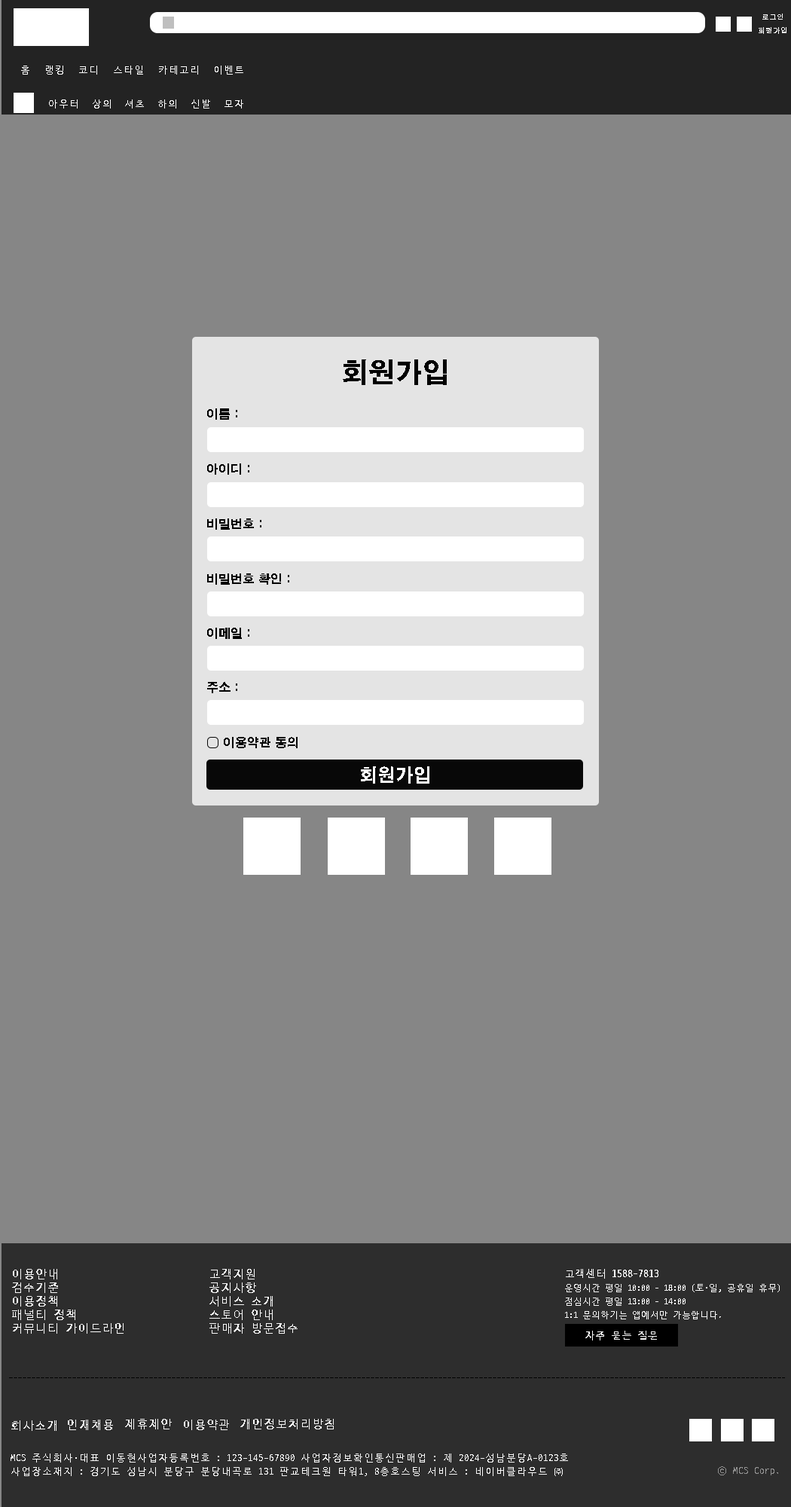
<style>
.page{position:relative;width:791px;height:1507px;background:#868686}
.page>*{position:absolute;margin:0}
.t1{font:7.5px "Gulim";color:#ffffff}
.t2{font:9.8px "D2Coding";color:#ffffff}
.t3{font:27.1px "H2gtrE";color:#010101}
.t4{font:12.1px "H2gtrE";color:#010101}
.t5{font:12.1px "H2gtrE";color:#080808}
.t6{font:18.1px "H2gtrE";color:#ffffff}
.t7{font:12.1px/13.6px "D2CodingBold";color:#fafafa}
.t8{font:9px/13.6px "D2Coding";color:#fafafa}
.t9{font:10.5px/13.6px "D2CodingBold";color:#fafafa}
.t10{font:10.5px "D2CodingBold";color:#fafafa}
.t11{font:12.1px "D2CodingBold";color:#fafafa}
.t12{font:9.8px/13.6px "D2Coding";color:#fafafa}
.t13{font:9.8px "D2Coding";color:#919191}
</style>
<div class="page">
<p class="t1" style="left:763px;top:14px;width:20px;height:6px">로그인</p>
<p class="t1" style="left:759px;top:27px;width:28px;height:7px">회원가입</p>
<p class="t2" style="left:21px;top:66px;width:8px;height:9px">홈</p>
<p class="t2" style="left:46px;top:66px;width:17px;height:9px">랭킹</p>
<p class="t2" style="left:79px;top:66px;width:18px;height:9px">코디</p>
<p class="t2" style="left:114px;top:66px;width:29px;height:9px">스타일</p>
<p class="t2" style="left:159px;top:66px;width:39px;height:9px">카테고리</p>
<p class="t2" style="left:215px;top:66px;width:28px;height:9px">이벤트</p>
<p class="t2" style="left:49px;top:99px;width:29px;height:10px">아우터</p>
<p class="t2" style="left:93px;top:99px;width:18px;height:10px">상의</p>
<p class="t2" style="left:125px;top:99px;width:19px;height:10px">셔츠</p>
<p class="t2" style="left:158px;top:99px;width:18px;height:10px">하의</p>
<p class="t2" style="left:191px;top:99px;width:19px;height:10px">신발</p>
<p class="t2" style="left:225px;top:99px;width:18px;height:10px">모자</p>
<p class="t3" style="left:343px;top:359px;width:104px;height:26px">회원가입</p>
<p class="t4" style="left:207px;top:408px;width:30px;height:12px">이름 :</p>
<p class="t4" style="left:207px;top:463px;width:42px;height:12px">아이디 :</p>
<p class="t4" style="left:207px;top:518px;width:54px;height:12px">비밀번호 :</p>
<p class="t4" style="left:207px;top:573px;width:82px;height:12px">비밀번호 확인 :</p>
<p class="t4" style="left:207px;top:628px;width:42px;height:11px">이메일 :</p>
<p class="t4" style="left:207px;top:682px;width:30px;height:11px">주소 :</p>
<p class="t5" style="left:224px;top:737px;width:74px;height:11px">이용약관 동의</p>
<p class="t6" style="left:361px;top:766px;width:69px;height:18px">회원가입</p>
<p class="t7" style="left:12px;top:1269px;width:112px;height:65px">이용안내<br>검수기준<br>이용정책<br>패널티 정책<br>커뮤니티 가이드라인</p>
<p class="t7" style="left:209px;top:1269px;width:89px;height:65px">고객지원<br>공지사항<br>서비스 소개<br>스토어 안내<br>판매자 방문접수</p>
<p class="t8" style="left:565px;top:1269px;width:215px;height:50px"><span class="t9">고객센터 1588-7813<br></span>운영시간 평일 10:00 - 18:00 (토·일, 공휴일 휴무)<br>점심시간 평일 13:00 - 14:00<br>1:1 문의하기는 앱에서만 가능합니다.</p>
<p class="t10" style="left:586px;top:1331px;width:71px;height:10px">자주 묻는 질문</p>
<p class="t11" style="left:11px;top:1420px;width:46px;height:11px">회사소개</p>
<p class="t11" style="left:68px;top:1420px;width:45px;height:10px">인재채용</p>
<p class="t11" style="left:125px;top:1419px;width:47px;height:10px">제휴제안</p>
<p class="t11" style="left:184px;top:1420px;width:45px;height:10px">이용약관</p>
<p class="t11" style="left:240px;top:1419px;width:94px;height:10px">개인정보처리방침</p>
<p class="t12" style="left:11px;top:1454px;width:557px;height:22px">MCS 주식회사·대표 이동현사업자등록번호 : 123-145-67890 사업자정보확인통신판매업 : 제 2024-성남분당A-0123호<br>사업장소재지 : 경기도 성남시 분당구 분당내곡로 131 판교테크원 타워1, 8층호스팅 서비스 : 네이버클라우드 ㈜</p>
<p class="t13" style="left:718px;top:1466px;width:60px;height:9px">ⓒ MCS Corp.</p>
</div>
